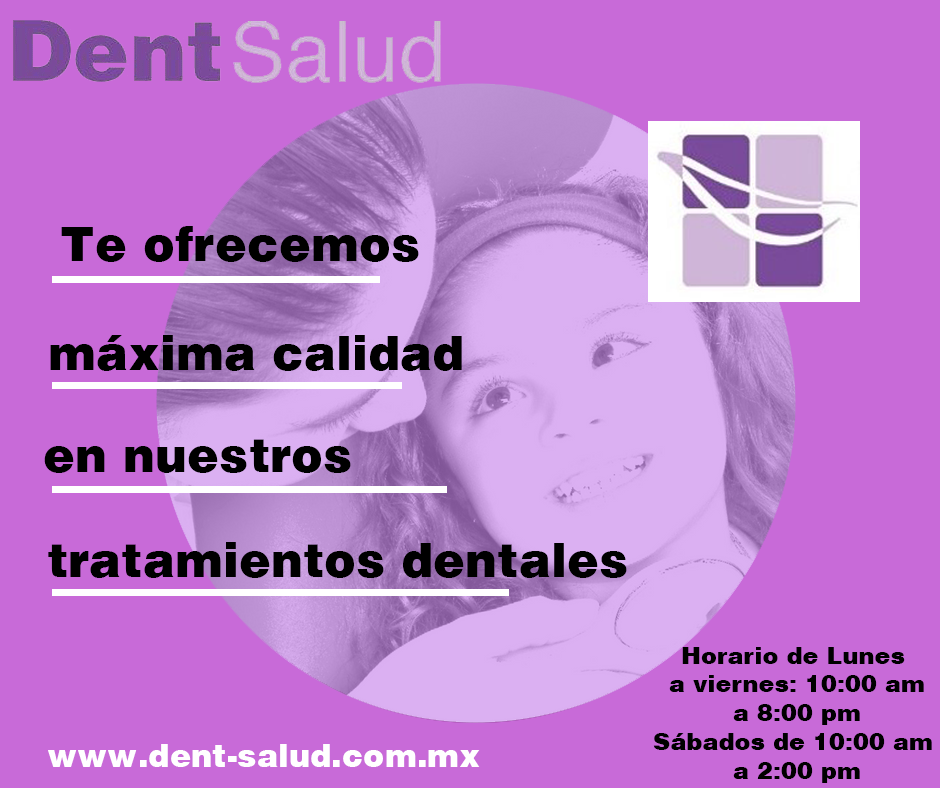
<style>
.page{position:relative;width:940px;height:788px;background:#c86ad8}
.page>*{position:absolute;margin:0}
.t1{font:48px "Helvetica-Black";color:#000000}
.t2{font:24px "Helvetica-Black";color:#000000}
.t3{font:32px "Helvetica-Black";color:#ffffff}
</style>
<div class="page">
<p class="t1" style="left:61px;top:226px;width:358px;height:36px">Te ofrecemos</p>
<p class="t1" style="left:50px;top:335px;width:412px;height:36px">máxima calidad</p>
<p class="t1" style="left:44px;top:439px;width:307px;height:34px">en nuestros</p>
<p class="t1" style="left:48px;top:542px;width:579px;height:36px">tratamientos dentales</p>
<p class="t2" style="left:653px;top:647px;width:279px;height:136px;text-align:center">Horario de Lunes<br> a viernes: 10:00 am<br> a 8:00 pm<br>Sábados de 10:00 am<br> a 2:00 pm</p>
<p class="t3" style="left:48px;top:744px;width:432px;height:23px">www.dent-salud.com.mx</p>
</div>
